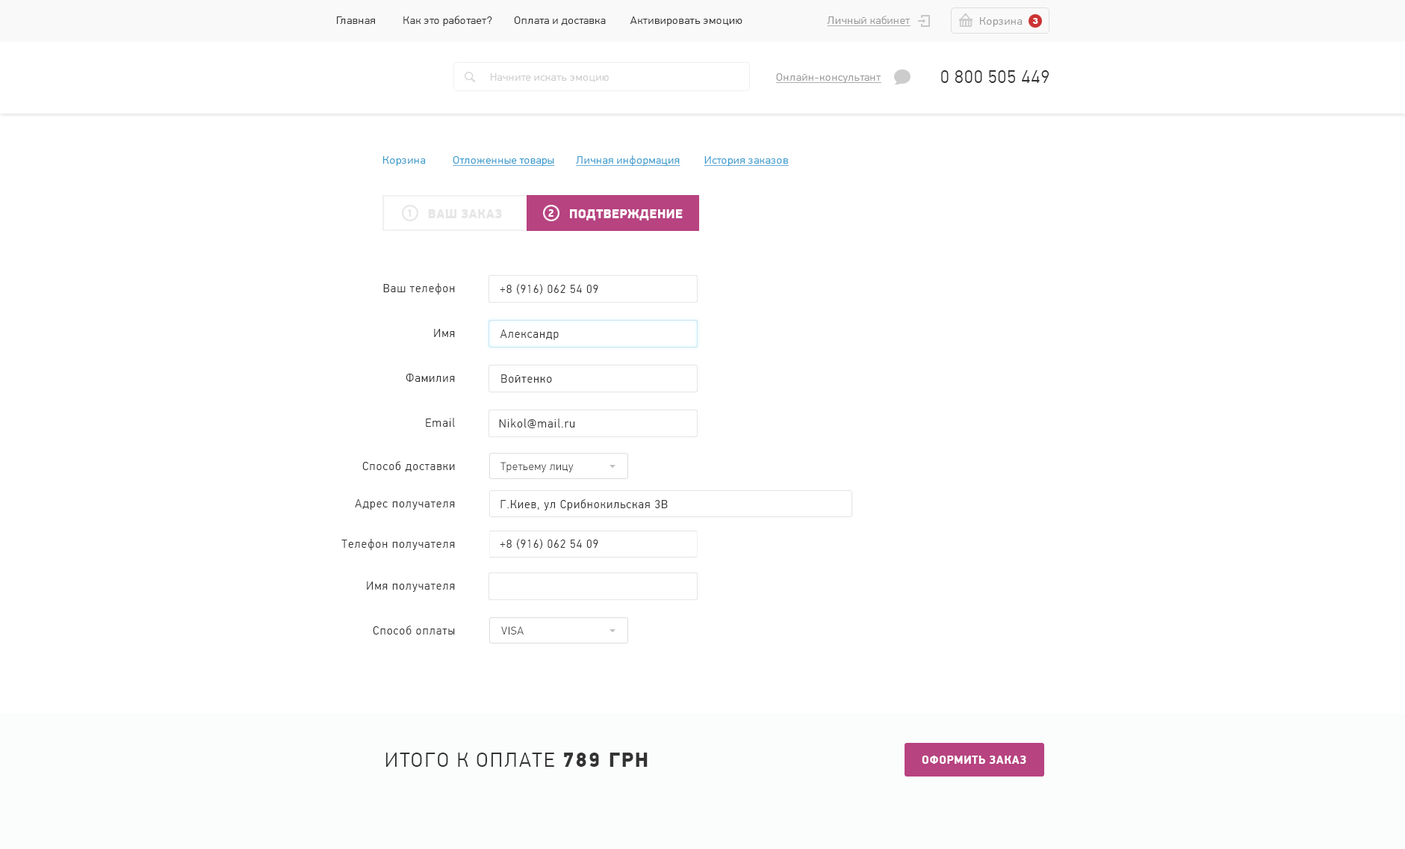
<style>
.page{position:relative;width:1405px;height:849px;background:#ffffff}
.page>*{position:absolute;margin:0}
.t1{font:11.2px "PFDinTextPro-Light";letter-spacing:0.04em;color:#333333}
.t2{font:11.2px "PFDinTextPro-Light";letter-spacing:0.04em;color:#333333;text-transform:uppercase}
.t3{font:11.2px "PFDinTextPro-Light";letter-spacing:0.04em;color:#999999;text-decoration:underline}
.t4{font:11.2px "PFDinTextPro-Light";letter-spacing:0.04em;color:#999999;text-transform:uppercase;text-decoration:underline}
.t5{font:11.2px "PFDinTextPro-Light";letter-spacing:0.04em;color:#999999}
.t6{font:11.2px "PFDinTextPro-Light";letter-spacing:0.04em;color:#999999;text-transform:uppercase}
.t7{font:8.2px "Arial-Black";letter-spacing:0.04em;color:#ffffff;text-transform:uppercase}
.t8{font:11.2px "PFDinTextPro-Light";letter-spacing:0.04em;color:#cccccc}
.t9{font:17.9px "PFDinTextPro-Light";letter-spacing:0.04em;color:#333333;text-transform:uppercase}
.t10{font:11.2px "PFDinTextPro-Light";letter-spacing:0.04em;color:#3399cc;text-decoration:underline}
.t11{font:11.2px "PFDinTextPro-Light";letter-spacing:0.04em;color:#3399cc}
.t12{font:11.2px "PFDinTextPro-Light";letter-spacing:0.04em;color:#3399cc;text-transform:uppercase;text-decoration:underline}
.t13{font:10.9px "PFDinDisplayPro-Black";letter-spacing:0.03em;color:#e6e6e6;text-transform:uppercase;scale:0.96 1}
.t14{font:13.2px "PFDinDisplayPro-Black";letter-spacing:0.03em;color:#e6e6e6;text-transform:uppercase;scale:0.96 1}
.t15{font:10.9px "PFDinDisplayPro-Black";letter-spacing:0.03em;color:#ffffff;text-transform:uppercase;scale:0.96 1}
.t16{font:13.2px "PFDinDisplayPro-Black";letter-spacing:0.03em;color:#ffffff;text-transform:uppercase;scale:0.96 1}
.t17{font:11.7px "PFDinTextPro-Light";letter-spacing:0.09em;color:#333333;scale:0.96 1}
.t18{font:21px "PFDinTextPro-Light";letter-spacing:0.09em;color:#333333;scale:0.96 1}
.t19{font:21px "PFDinDisplayPro-Black";letter-spacing:0.09em;color:#333333;scale:0.96 1}
.t20{font:11.7px "PFDinDisplayPro-Black";letter-spacing:0.05em;color:#ffffff;text-transform:uppercase;scale:0.96 1}
</style>
<div class="page">
<p class="t1" style="left:337px;top:16px;width:406px;height:10px"><span class="t2">Г</span>лавная          <span class="t2">к</span>ак это работает?        Оплата и доставка         Активировать эмоцию</p>
<p class="t3" style="left:827px;top:16px;width:84px;height:10px"><span class="t4">л</span>ичный кабинет</p>
<p class="t5" style="left:980px;top:17px;width:43px;height:10px"><span class="t6">К</span>орзина</p>
<p class="t7" style="left:1032px;top:18px;width:6px;height:6px">3</p>
<p class="t8" style="left:491px;top:73px;width:118px;height:9px">Начните искать эмоцию</p>
<p class="t3" style="left:776px;top:73px;width:105px;height:10px"><span class="t4">О</span>нлайн-консультант</p>
<p class="t9" style="left:941px;top:70px;width:109px;height:13px">0 800 505 449</p>
<p class="t10" style="left:383px;top:155px;width:406px;height:11px"><span class="t11">Корзина          </span><span class="t12">О</span>тложенные товары        Личная информация         История заказов</p>
<p class="t13" style="left:408px;top:209px;width:4px;height:8px">1</p>
<p class="t14" style="left:428px;top:209px;width:74px;height:9px">Ваш заказ</p>
<p class="t15" style="left:548px;top:209px;width:6px;height:8px">2</p>
<p class="t16" style="left:570px;top:209px;width:113px;height:11px">подтверждение</p>
<p class="t17" style="left:383px;top:283px;width:72px;height:11px">Ваш телефон</p>
<p class="t17" style="left:500px;top:284px;width:98px;height:10px">+8 (916) 062 54 09</p>
<p class="t17" style="left:434px;top:329px;width:21px;height:8px">Имя</p>
<p class="t17" style="left:500px;top:329px;width:59px;height:11px">Александр</p>
<p class="t17" style="left:406px;top:374px;width:49px;height:8px">Фамилия</p>
<p class="t17" style="left:501px;top:374px;width:51px;height:8px">Войтенко</p>
<p class="t17" style="left:426px;top:418px;width:29px;height:9px">Email</p>
<p class="t17" style="left:499px;top:418px;width:76px;height:10px">Nikol@mail.ru</p>
<p class="t17" style="left:362px;top:461px;width:93px;height:10px">Способ доставки</p>
<p class="t1" style="left:501px;top:462px;width:73px;height:10px"><span class="t2">Т</span>ретьему лицу</p>
<p class="t17" style="left:355px;top:499px;width:100px;height:10px">Адрес получателя</p>
<p class="t17" style="left:501px;top:499px;width:167px;height:11px">Г.Киев, ул Срибнокильская 3В</p>
<p class="t17" style="left:341px;top:539px;width:114px;height:11px">Телефон получателя</p>
<p class="t17" style="left:500px;top:539px;width:98px;height:10px">+8 (916) 062 54 09</p>
<p class="t17" style="left:367px;top:581px;width:88px;height:11px">Имя получателя</p>
<p class="t17" style="left:373px;top:625px;width:82px;height:9px">Способ оплаты</p>
<p class="t2" style="left:501px;top:626px;width:23px;height:8px">VISA</p>
<p class="t18" style="left:385px;top:752px;width:263px;height:14px">ИТОГО К ОПЛАТЕ <span class="t19">789 ГРН</span></p>
<p class="t20" style="left:922px;top:755px;width:104px;height:8px">оформить заказ</p>
</div>
